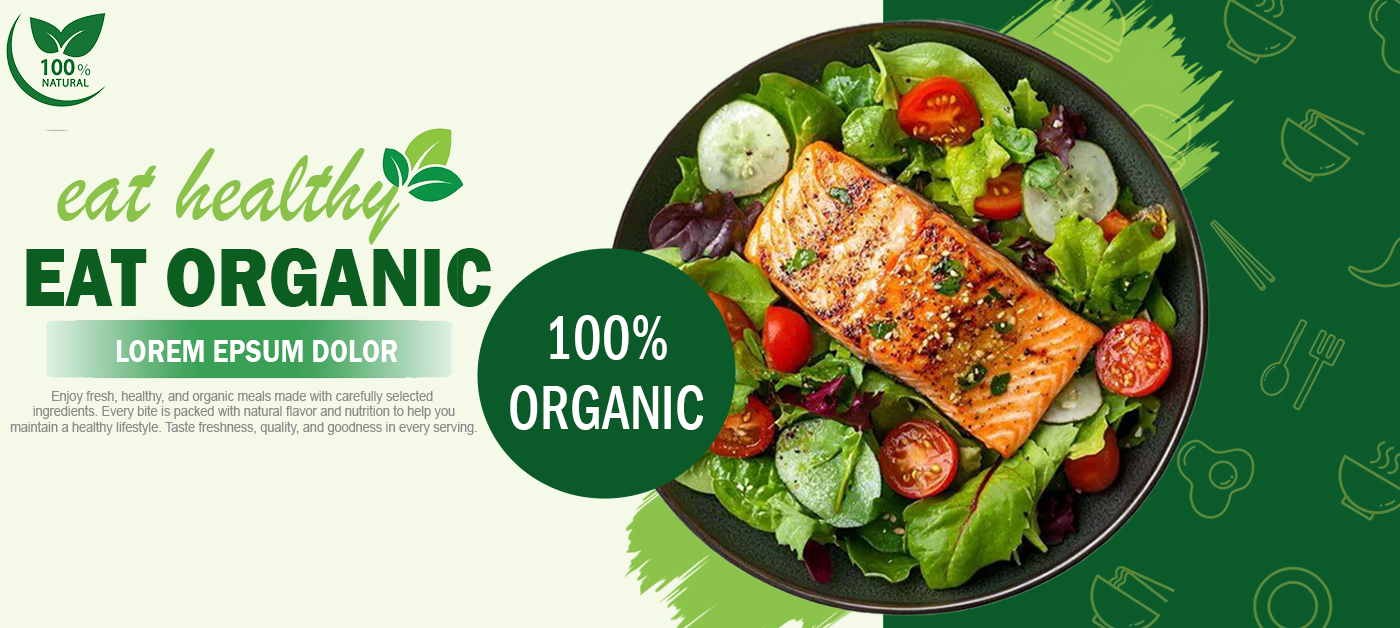
<style>
.page{position:relative;width:1400px;height:628px;background:#f4f9e8}
.page>*{position:absolute;margin:0}
.t1{font:111.1px "BrushScriptMT";color:#8bc34a;scale:0.88 1}
.t2{font:86.2px "FranklinGothic-Heavy";color:#0b5e20;scale:0.88 1}
.t3{font:64.5px/70.5px "FranklinGothic-MediumCond";color:#ffffff;scale:0.88 1}
.t4{font:32.2px "FranklinGothic-Demi";color:#ffffff;scale:0.88 1}
.t5{font:14.4px/15.8px "ArialMT";color:#8b8b8b;scale:0.88 1}
</style>
<div class="page">
<p class="t1" style="left:57px;top:148px;width:343px;height:97px">eat healthy</p>
<p class="t2" style="left:26px;top:248px;width:465px;height:59px">EAT ORGANIC</p>
<p class="t3" style="left:510px;top:315px;width:194px;height:115px;text-align:center">100%<br>ORGANIC</p>
<p class="t4" style="left:116px;top:340px;width:282px;height:22px">LOREM EPSUM DOLOR</p>
<p class="t5" style="left:10px;top:390px;width:467px;height:45px;text-align:center">Enjoy fresh, healthy, and organic meals made with carefully selected<br> ingredients. Every bite is packed with natural flavor and nutrition to help you<br> maintain a healthy lifestyle. Taste freshness, quality, and goodness in every serving.</p>
</div>
